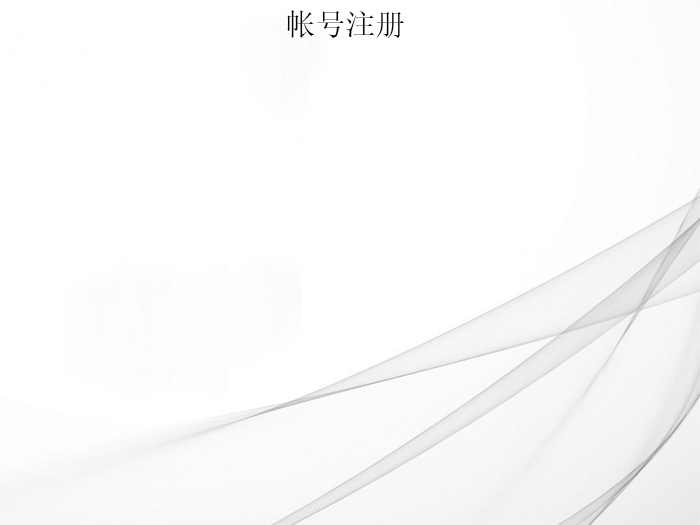
<style>
.page{position:relative;width:700px;height:525px;background:#ffffff}
.page>*{position:absolute;margin:0}
.t1{font:30px "SimSun";color:#000000}
</style>
<div class="page">
<p class="t1" style="left:287px;top:10px;width:117px;height:28px">帐号注册</p>
</div>
